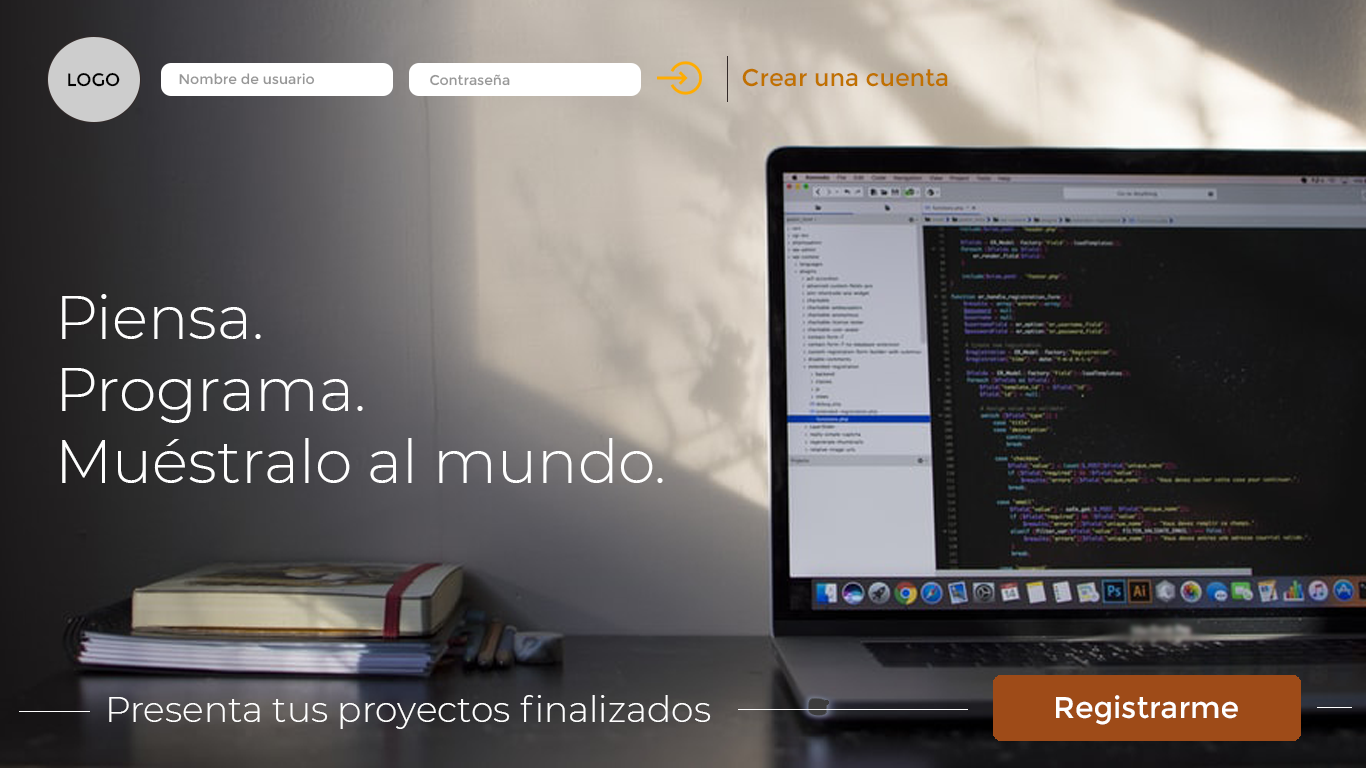
<style>
.page{position:relative;width:1366px;height:768px}
.page>*{position:absolute;margin:0}
.t1{font:18px "Montserrat-Regular";color:#000000}
.t2{font:14px "Montserrat-Regular";color:#989898}
.t3{font:24px "Montserrat-Regular";color:#c07100}
.t4{font:60px "Montserrat-Light";color:#fefefe}
.t5{font:36px "Montserrat-Light";color:#fefefe}
.t6{font:30px "Montserrat-Regular";color:#ffffff}
</style>
<div class="page">
<p class="t1" style="left:68px;top:72px;width:52px;height:15px">LOGO</p>
<p class="t2" style="left:179px;top:73px;width:136px;height:12px">Nombre de usuario</p>
<p class="t2" style="left:430px;top:74px;width:80px;height:12px">Contraseña</p>
<p class="t3" style="left:742px;top:68px;width:206px;height:19px">Crear una cuenta</p>
<p class="t4" style="left:62px;top:294px;width:601px;height:189px">Piensa.<br>Programa.<br>Muéstralo al mundo.</p>
<p class="t5" style="left:109px;top:695px;width:602px;height:34px">Presenta tus proyectos finalizados</p>
<p class="t6" style="left:1056px;top:695px;width:182px;height:30px">Registrarme</p>
</div>
